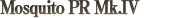
<style>
.page{position:relative;width:171px;height:18px;background:#ffffff}
.page>*{position:absolute;margin:0}
.t1{font:18px "RyuminPro-ExBold";letter-spacing:-0.08em;color:#4a3f32;font-weight:bold;scale:0.9 1}
</style>
<div class="page">
<p class="t1" style="left:0px;top:0px;width:140px;height:18px">Mosquito PR Mk.IV</p>
</div>
